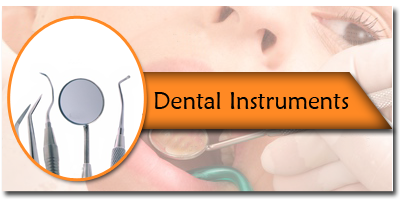
<style>
.page{position:relative;width:400px;height:200px}
.page>*{position:absolute;margin:0}
.t1{font:24px "MaiandraGD-Regular";color:#000000}
</style>
<div class="page">
<p class="t1" style="left:154px;top:92px;width:195px;height:17px">Dental Instruments</p>
</div>
